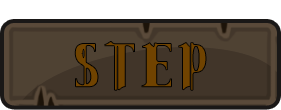
<style>
.page{position:relative;width:281px;height:110px}
.page>*{position:absolute;margin:0}
.t1{font:65px "Hangyaku";letter-spacing:0.1em;color:#704300;font-weight:bold}
</style>
<div class="page">
<p class="t1" style="left:74px;top:41px;width:133px;height:50px">STEP</p>
</div>
